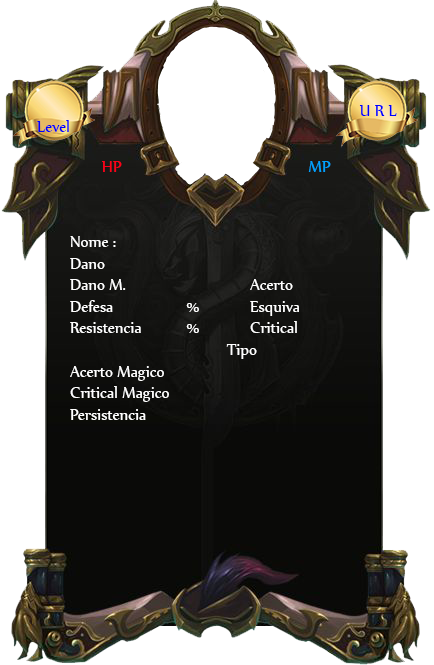
<style>
.page{position:relative;width:434px;height:665px;background:#ffffff}
.page>*{position:absolute;margin:0}
.t1{font:18px "Nyala-Regular";color:#0000ff}
.t2{font:18px "Nyala-Regular";color:#ff0018}
.t3{font:18px "Nyala-Regular";color:#00a2ff}
.t4{font:18px "Nyala-Regular";color:#ffffff}
</style>
<div class="page">
<p class="t1" style="left:359px;top:105px;width:38px;height:11px">U R L</p>
<p class="t1" style="left:37px;top:120px;width:32px;height:12px">Level</p>
<p class="t2" style="left:102px;top:161px;width:20px;height:11px">HP</p>
<p class="t3" style="left:308px;top:161px;width:23px;height:11px">MP</p>
<p class="t4" style="left:70px;top:236px;width:229px;height:184px">Nome :<br>Dano<br>Dano M.       Acerto<br>Defesa    %  Esquiva<br>Resistencia    %     Critical<br>       Tipo<br>Acerto Magico<br>Critical Magico<br>Persistencia</p>
</div>
